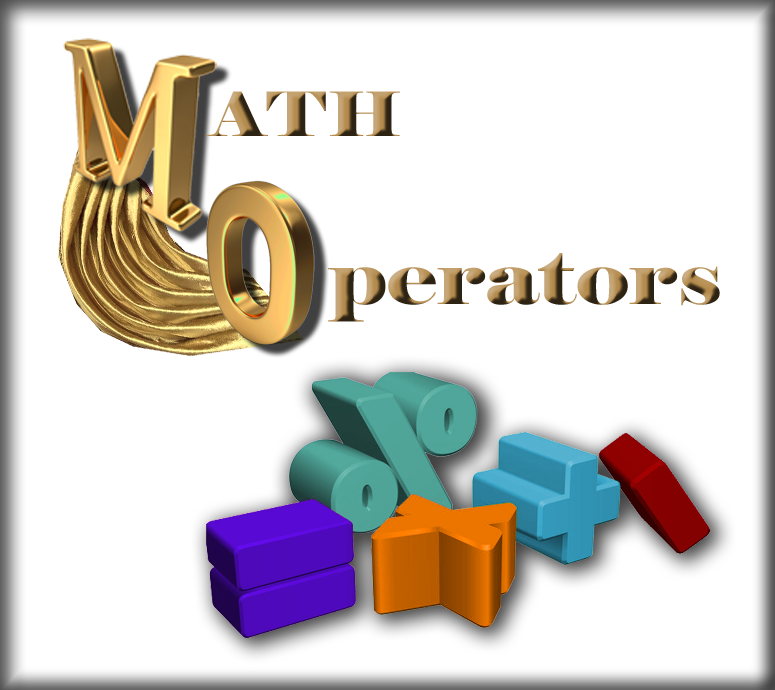
<style>
.page{position:relative;width:775px;height:690px;background:#ffffff}
.page>*{position:absolute;margin:0}
.t1{font:61px "Elephant-Regular";scale:1.23 1}
.t2{font:75.8px "Elephant-Regular";scale:1.23 1}
</style>
<div class="page">
<p class="t1" style="left:206px;top:91px;width:194px;height:45px">ATH</p>
<p class="t2" style="left:328px;top:253px;width:392px;height:69px">perators</p>
</div>
